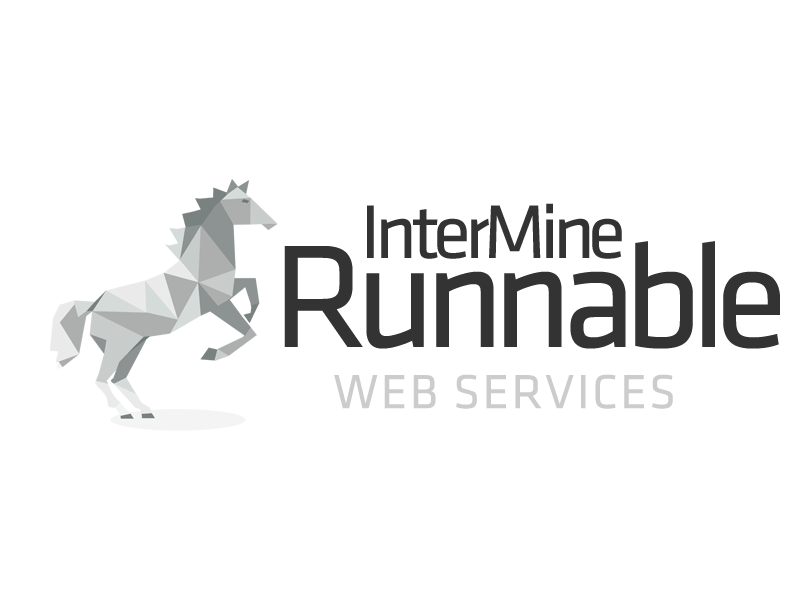
<style>
.page{position:relative;width:800px;height:600px;background:#ffffff}
.page>*{position:absolute;margin:0}
.t1{font:79px "Klavika-Regular";letter-spacing:-0.08em;color:#333333}
.t2{font:151.5px "Klavika-Regular";letter-spacing:-0.08em;color:#333333}
.t3{font:49.3px "Klavika-Regular";letter-spacing:0.05em;color:#cccccc;text-transform:uppercase}
</style>
<div class="page">
<p class="t1" style="left:367px;top:203px;width:255px;height:56px">InterMine</p>
<p class="t2" style="left:284px;top:241px;width:496px;height:108px">Runnable</p>
<p class="t3" style="left:334px;top:374px;width:339px;height:35px">web services</p>
</div>
